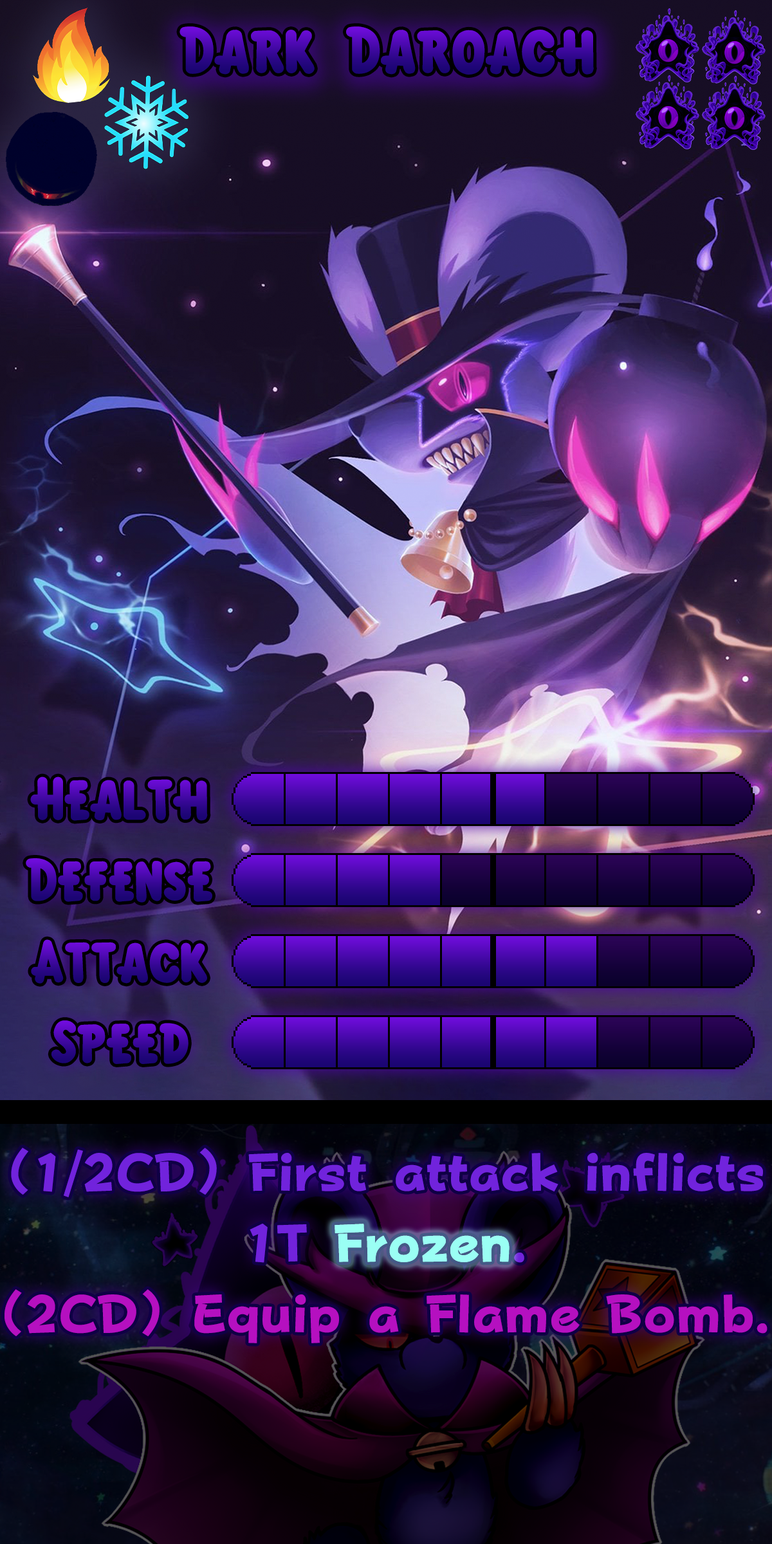
<style>
.page{position:relative;width:772px;height:1544px}
.page>*{position:absolute;margin:0}
.t1{font:102.3px "KirbyClassic"}
.t2{font:92.7px "KirbyClassic"}
.t3{font:90.1px/70.8px "FOTPopHappinessStrp-ExtraBold";color:#7123dc}
.t4{font:90.1px/70.8px "FOTPopHappinessStrp-ExtraBold";color:#9afff4}
.t5{font:90.1px/70.8px "FOTPopHappinessStrp-ExtraBold";color:#b510c0}
.t6{font:90.1px "FOTPopHappinessStrp-ExtraBold";color:#9afff4}
</style>
<div class="page">
<p class="t1" style="left:180px;top:26px;width:414px;height:49px">Dark Daroach</p>
<p class="t2" style="left:30px;top:777px;width:178px;height:44px">Health</p>
<p class="t2" style="left:26px;top:858px;width:186px;height:45px">Defense</p>
<p class="t2" style="left:31px;top:939px;width:176px;height:45px">Attack</p>
<p class="t2" style="left:51px;top:1021px;width:138px;height:43px">Speed</p>
<p class="t3" style="left:5px;top:1148px;width:763px;height:196px;text-align:center">(1/2CD) First attack inflicts 1T <span class="t4">Frozen</span>.<br><span class="t5">(2CD) Equip a Flame Bomb.</span></p>
<p class="t6" style="left:335px;top:1224px;width:175px;height:38px">Frozen</p>
</div>
